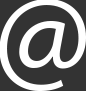
<style>
.page{position:relative;width:86px;height:91px;background:#333333}
.page>*{position:absolute;margin:0}
.t1{font:131.8px "MyriadPro-Regular";color:#ffffff}
</style>
<div class="page">
<p class="t1" style="left:0px;top:0px;width:86px;height:91px">@</p>
</div>
